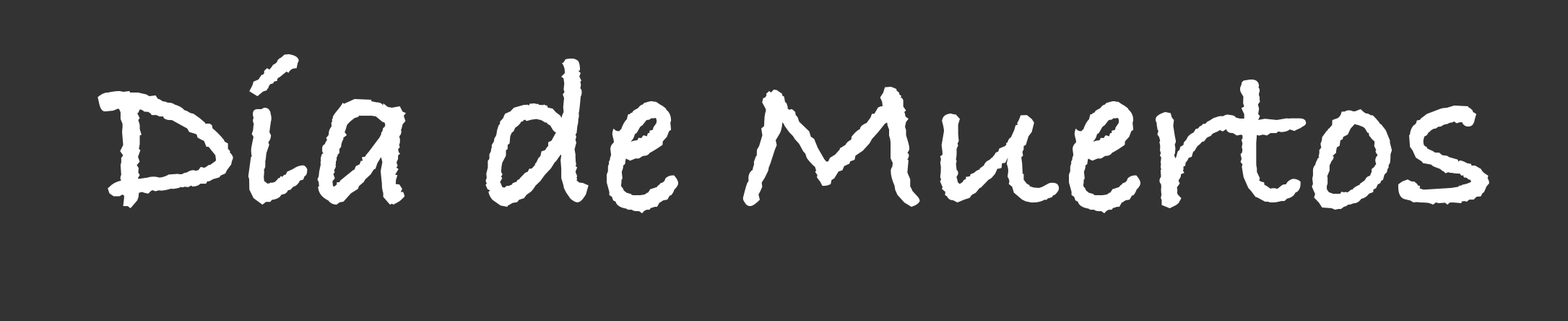
<style>
.page{position:relative;width:1568px;height:321px;background:#333333}
.page>*{position:absolute;margin:0}
.t1{font:216.7px "BradleyHandITCTT-Bold";color:#ffffff}
</style>
<div class="page">
<p class="t1" style="left:98px;top:54px;width:1391px;height:159px">Día de Muertos</p>
</div>
